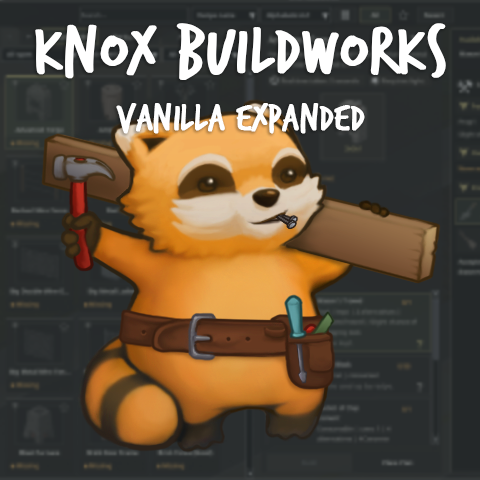
<style>
.page{position:relative;width:480px;height:480px}
.page>*{position:absolute;margin:0}
.t1{font:72px "TrashHand";color:#ffffff;font-weight:bold}
.t2{font:40px "TrashHand";color:#ffffff;font-weight:bold}
</style>
<div class="page">
<p class="t1" style="left:35px;top:23px;width:411px;height:58px">Knox Buildworks</p>
<p class="t2" style="left:116px;top:103px;width:249px;height:31px">Vanilla Expanded</p>
</div>
